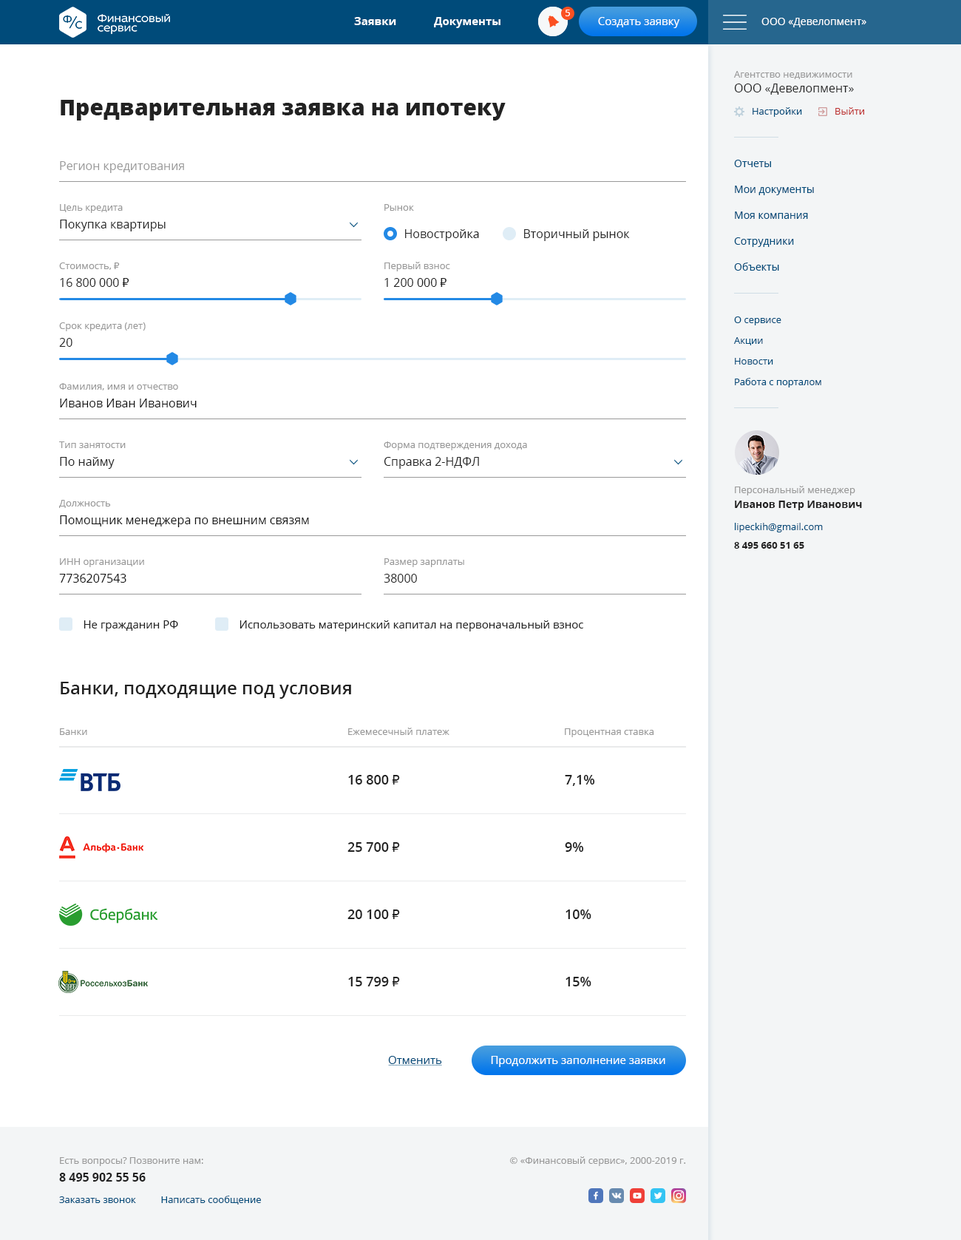
<style>
.page{position:relative;width:961px;height:1240px;background:#ffffff}
.page>*{position:absolute;margin:0}
.t1{font:11.1px "OpenSans-Bold";color:#ffffff}
.t2{font:9.6px "OpenSans";color:#ffffff}
.t3{font:11.1px "OpenSans";color:#ffffff}
.t4{font:10.4px "OpenSans";color:#ffffff}
.t5{font:9.6px "OpenSans";color:#999999}
.t6{font:11.8px/14.8px "OpenSans";color:#222222}
.t7{font:22.2px "OpenSans-Extrabold";color:#222222}
.t8{font:9.6px "OpenSans";color:#004b7a}
.t9{font:9.6px "OpenSans";color:#be3030}
.t10{font:11.8px "OpenSans";color:#999999}
.t11{font:10.4px/25.9px "OpenSans";color:#004b7a}
.t12{font:11.8px/17.7px "OpenSans";color:#222222}
.t13{font:11.8px "OpenSans";color:#222222}
.t14{font:9.6px "Tahoma";color:#999999}
.t15{font:11.8px/17.7px "Tahoma";color:#222222}
.t16{font:9.6px/20.7px "OpenSans";color:#004b7a}
.t17{font:11.8px/17.7px "OpenSans";color:#111111}
.t18{font:10.4px/14.8px "OpenSans-Bold";color:#222222}
.t19{font:9.6px "OpenSans-Bold";color:#222222}
.t20{font:11.1px "OpenSans";color:#222222}
.t21{font:17.7px "OpenSans-Semibold";color:#222222}
.t22{font:13.3px "OpenSans-Semibold";color:#222222}
.t23{font:13.3px "Tahoma";color:#222222}
.t24{font:11.1px "OpenSans";color:#004b7a}
.t25{font:9.6px/17.7px "OpenSans";color:#999999}
.t26{font:11.8px/17.7px "OpenSans-Bold";color:#222222}
</style>
<div class="page">
<p class="t1" style="left:354px;top:17px;width:147px;height:11px">Заявки             Документы</p>
<p class="t2" style="left:566px;top:10px;width:4px;height:6px">5</p>
<p class="t3" style="left:598px;top:17px;width:82px;height:11px">Создать заявку</p>
<p class="t4" style="left:762px;top:18px;width:105px;height:9px">ООО «Девелопмент»</p>
<p class="t5" style="left:734px;top:71px;width:120px;height:24px">Агентство недвижимости<br><span class="t6">ООО «Девелопмент»</span></p>
<p class="t7" style="left:61px;top:100px;width:445px;height:21px">Предварительная заявка на ипотеку</p>
<p class="t8" style="left:753px;top:107px;width:112px;height:10px">Настройки             <span class="t9">Выйти</span></p>
<p class="t10" style="left:60px;top:161px;width:124px;height:12px"><span class="t5"> <br></span>Регион кредитования</p>
<p class="t11" style="left:734px;top:160px;width:80px;height:111px">Отчеты<br>Мои документы<br>Моя компания<br>Сотрудники<br>Объекты</p>
<p class="t12" style="left:60px;top:204px;width:106px;height:27px"><span class="t5">Цель кредита<br></span>Покупка квартиры</p>
<p class="t5" style="left:385px;top:204px;width:29px;height:7px">Рынок</p>
<p class="t13" style="left:405px;top:229px;width:74px;height:12px">Новостройка</p>
<p class="t13" style="left:524px;top:229px;width:106px;height:12px">Вторичный рынок</p>
<p class="t5" style="left:59px;top:263px;width:70px;height:24px">Стоимость, <span class="t14">₽<br></span><span class="t12">16 800 000 </span><span class="t15">₽</span></p>
<p class="t5" style="left:385px;top:262px;width:65px;height:25px">Первый взнос <br><span class="t12">1 200 000 </span><span class="t15">₽</span></p>
<p class="t16" style="left:734px;top:317px;width:88px;height:71px">О сервисе<br>Акции<br>Новости<br>Работа с порталом</p>
<p class="t5" style="left:59px;top:322px;width:87px;height:25px">Срок кредита (лет)<br><span class="t12">20</span></p>
<p class="t5" style="left:59px;top:383px;width:138px;height:25px">Фамилия, имя и отчество<br><span class="t17">Иванов Иван Иванович</span></p>
<p class="t5" style="left:59px;top:442px;width:67px;height:27px">Тип занятости<br><span class="t12">По найму</span></p>
<p class="t5" style="left:384px;top:442px;width:143px;height:27px">Форма подтверждения дохода<br><span class="t12">Справка 2-НДФЛ</span></p>
<p class="t5" style="left:735px;top:486px;width:127px;height:24px">Персональный менеджер<br><span class="t18">Иванов Петр Иванович</span></p>
<p class="t17" style="left:59px;top:500px;width:250px;height:27px"><span class="t5">Должность<br></span>Помощник менеджера по внешним связям</p>
<p class="t8" style="left:735px;top:523px;width:88px;height:9px">lipeckih@gmail.com</p>
<p class="t19" style="left:734px;top:542px;width:71px;height:7px">8 495 660 51 65</p>
<p class="t5" style="left:59px;top:558px;width:85px;height:25px">ИНН организации<br><span class="t17">7736207543</span></p>
<p class="t5" style="left:384px;top:558px;width:80px;height:25px">Размер зарплаты<br><span class="t12">38000</span></p>
<p class="t20" style="left:84px;top:620px;width:94px;height:12px">Не гражданин РФ</p>
<p class="t20" style="left:240px;top:620px;width:344px;height:12px">Использовать материнский капитал на первоначальный взнос</p>
<p class="t21" style="left:61px;top:682px;width:290px;height:17px">Банки, подходящие под условия</p>
<p class="t5" style="left:60px;top:728px;width:27px;height:7px">Банки</p>
<p class="t5" style="left:348px;top:728px;width:102px;height:7px">Ежемесечный платеж</p>
<p class="t5" style="left:565px;top:728px;width:90px;height:9px">Процентная ставка</p>
<p class="t22" style="left:348px;top:775px;width:52px;height:10px">16 800 <span class="t23">₽</span></p>
<p class="t22" style="left:565px;top:775px;width:30px;height:11px">7,1%</p>
<p class="t22" style="left:348px;top:842px;width:52px;height:10px">25 700 <span class="t23">₽</span></p>
<p class="t22" style="left:565px;top:842px;width:19px;height:10px">9%</p>
<p class="t22" style="left:348px;top:910px;width:52px;height:9px">20 100 <span class="t23">₽</span></p>
<p class="t22" style="left:566px;top:910px;width:26px;height:9px">10%</p>
<p class="t22" style="left:348px;top:977px;width:52px;height:10px">15 799 <span class="t23">₽</span></p>
<p class="t22" style="left:566px;top:977px;width:26px;height:10px">15%</p>
<p class="t24" style="left:388px;top:1056px;width:54px;height:8px">Отменить</p>
<p class="t3" style="left:491px;top:1056px;width:175px;height:11px">Продолжить заполнение заявки</p>
<p class="t25" style="left:59px;top:1157px;width:144px;height:25px">Есть вопросы? Позвоните нам:<br><span class="t26">8 495 902 55 56</span></p>
<p class="t5" style="left:510px;top:1157px;width:176px;height:9px">© «Финансовый сервис», 2000-2019 г.</p>
<p class="t8" style="left:59px;top:1196px;width:202px;height:9px">Заказать звонок          Написать сообщение</p>
</div>
